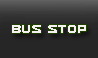
<style>
.page{position:relative;width:98px;height:58px;background:#262626}
.page>*{position:absolute;margin:0}
.t1{font:13px "Usuzi";color:#f6f1f1}
</style>
<div class="page">
<p class="t1" style="left:12px;top:25px;width:74px;height:8px">BUS stop</p>
</div>
